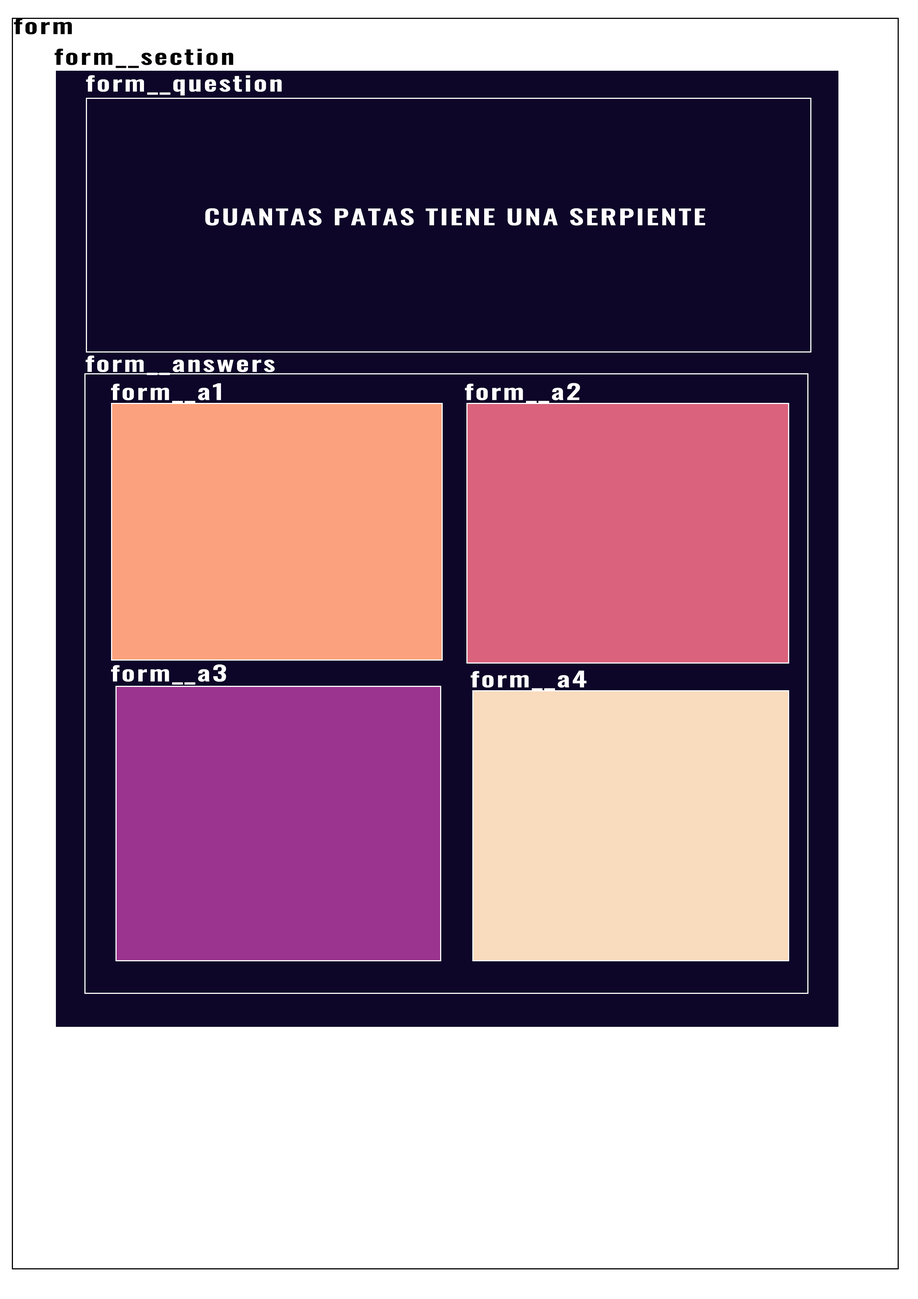
<style>
.page{position:relative;width:918px;height:1299px;background:#ffffff}
.page>*{position:absolute;margin:0}
.t1{font:20.5px "Oswald-Medium";letter-spacing:0.04em;color:#000000;font-weight:bold;scale:1.43 1}
.t2{font:20.5px "Oswald-Medium";letter-spacing:0.04em;color:#ffffff;font-weight:bold;scale:1.43 1}
</style>
<div class="page">
<p class="t1" style="left:14px;top:18px;width:58px;height:16px">form</p>
<p class="t1" style="left:54px;top:48px;width:179px;height:20px">form__section</p>
<p class="t2" style="left:86px;top:75px;width:196px;height:21px">form__question</p>
<p class="t2" style="left:205px;top:208px;width:500px;height:17px">CUANTAS PATAS TIENE UNA SERPIENTE</p>
<p class="t2" style="left:86px;top:355px;width:189px;height:20px">form__answers</p>
<p class="t2" style="left:111px;top:383px;width:110px;height:20px">form__a1</p>
<p class="t2" style="left:465px;top:383px;width:115px;height:20px">form__a2</p>
<p class="t2" style="left:111px;top:664px;width:115px;height:21px">form__a3</p>
<p class="t2" style="left:471px;top:670px;width:116px;height:20px">form__a4</p>
</div>
